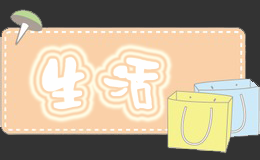
<style>
.page{position:relative;width:260px;height:160px;background:#333333}
.page>*{position:absolute;margin:0}
.t1{font:60px "HYr1gf";letter-spacing:0.1em;color:#fefefe;font-weight:bold}
</style>
<div class="page">
<p class="t1" style="left:42px;top:57px;width:117px;height:52px">生活</p>
</div>
